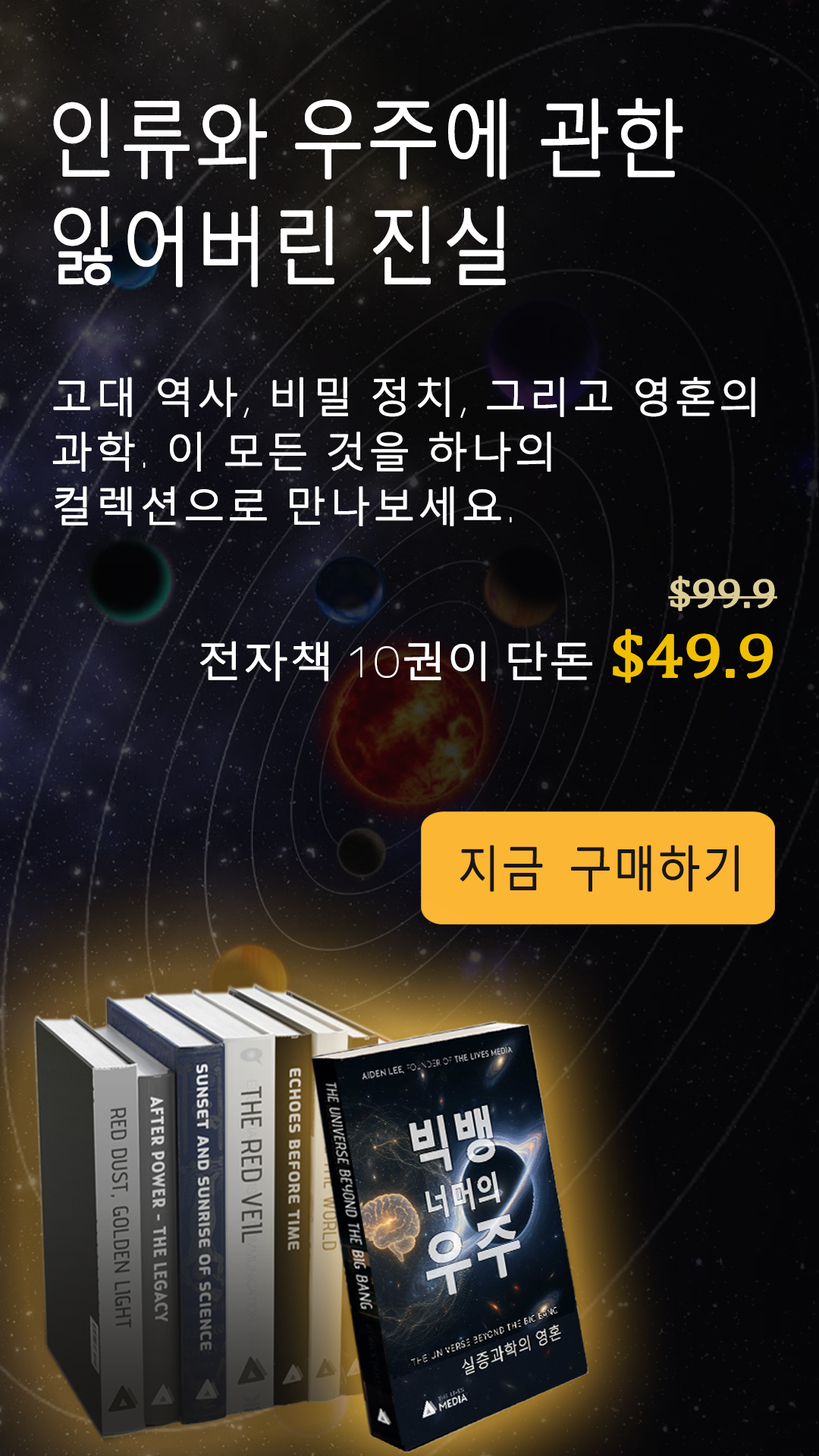
<style>
.page{position:relative;width:819px;height:1456px}
.page>*{position:absolute;margin:0}
.t1{font:83.4px/107.7px "MalgunGothic-Semilight";letter-spacing:0.005em;color:#ffffff;font-weight:bold;scale:0.87 1}
.t2{font:40.9px/54.6px "MalgunGothic-Semilight";letter-spacing:0.05em;color:#ffffff;font-weight:bold}
.t3{font:40.9px/54.6px "Chogokuboso-Gothic";letter-spacing:0.05em;color:#ffffff;font-weight:bold}
.t4{font:40.9px/69.8px "Cambria";letter-spacing:-0.025em;color:#dbcd95;font-weight:bold;scale:1.11 1}
.t5{font:40.9px/69.8px "MalgunGothic-Semilight";letter-spacing:-0.025em;color:#ffffff;font-weight:bold;scale:1.11 1}
.t6{font:40.9px/69.8px "Chogokuboso-Gothic";letter-spacing:-0.025em;color:#ffffff;font-weight:bold;scale:1.11 1}
.t7{font:62.8px/69.8px "Cambria";letter-spacing:-0.025em;color:#efbf04;font-weight:bold;scale:1.11 1}
.t8{font:47.8px "MalgunGothic-Semilight";letter-spacing:0.005em;color:#191616;font-weight:bold;scale:0.9 1}
</style>
<div class="page">
<p class="t1" style="left:53px;top:98px;width:630px;height:189px">인류와 우주에 관한 잃어버린 진실</p>
<p class="t2" style="left:52px;top:377px;width:703px;height:149px">고대 역사<span class="t3">, </span>비밀 정치<span class="t3">, </span>그리고 영혼의 과학<span class="t3">. </span>이 모든 것을 하나의 컬렉션으로 만나보세요<span class="t3">.</span></p>
<p class="t4" style="left:200px;top:576px;width:577px;height:107px;text-align:right">$99.9 <br><span class="t5">전자책</span><span class="t6"> 10</span><span class="t5">권이 단돈</span><span class="t7"> $49.9</span></p>
<p class="t8" style="left:460px;top:845px;width:279px;height:47px">지금 구매하기</p>
</div>
